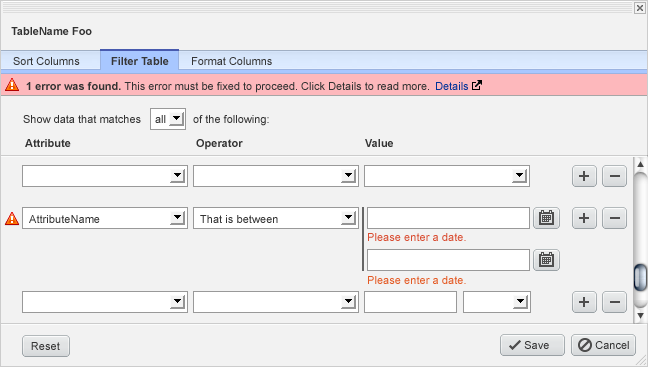
<style>
.page{position:relative;width:648px;height:367px;background:#f2f2f2}
.page>*{position:absolute;margin:0}
.t1{font:11px "Arial-BoldMT";color:#333333}
.t2{font:11px "ArialMT";color:#363636}
.t3{font:11px "Arial-BoldMT";color:#363636}
.t4{font:11px "ArialMT";color:#333333}
.t5{font:11px "ArialMT";color:#003399}
.t6{font:11px "ArialMT";letter-spacing:0.005em;color:#333333}
.t7{font:11px "ArialMT";letter-spacing:0.005em;color:#d94d32}
.t8{font:11px "ArialMT";letter-spacing:0.005em;color:#e45a24}
</style>
<div class="page">
<p class="t1" style="left:11px;top:27px;width:81px;height:8px">TableName Foo</p>
<p class="t2" style="left:13px;top:57px;width:67px;height:8px">Sort Columns</p>
<p class="t3" style="left:111px;top:57px;width:58px;height:8px">Filter Table</p>
<p class="t2" style="left:192px;top:57px;width:80px;height:8px">Format Columns</p>
<p class="t4" style="left:26px;top:82px;width:403px;height:11px"><span class="t1">1 error was found. </span>This error must be fixed to proceed. Click Details to read more.</p>
<p class="t5" style="left:436px;top:82px;width:32px;height:8px">Details</p>
<p class="t4" style="left:23px;top:115px;width:118px;height:8px">Show data that matches</p>
<p class="t4" style="left:155px;top:115px;width:11px;height:8px">all</p>
<p class="t4" style="left:193px;top:115px;width:76px;height:11px">of the following:</p>
<p class="t1" style="left:25px;top:139px;width:46px;height:8px">Attribute</p>
<p class="t1" style="left:196px;top:139px;width:47px;height:11px">Operator</p>
<p class="t1" style="left:365px;top:139px;width:28px;height:8px">Value</p>
<p class="t6" style="left:29px;top:215px;width:71px;height:8px">AttributeName</p>
<p class="t6" style="left:200px;top:215px;width:78px;height:8px">That is between</p>
<p class="t7" style="left:368px;top:233px;width:98px;height:8px">Please enter a date.</p>
<p class="t8" style="left:368px;top:276px;width:98px;height:8px">Please enter a date.</p>
<p class="t6" style="left:31px;top:342px;width:29px;height:8px">Reset</p>
<p class="t4" style="left:524px;top:341px;width:25px;height:8px">Save</p>
<p class="t4" style="left:595px;top:341px;width:34px;height:8px">Cancel</p>
</div>
